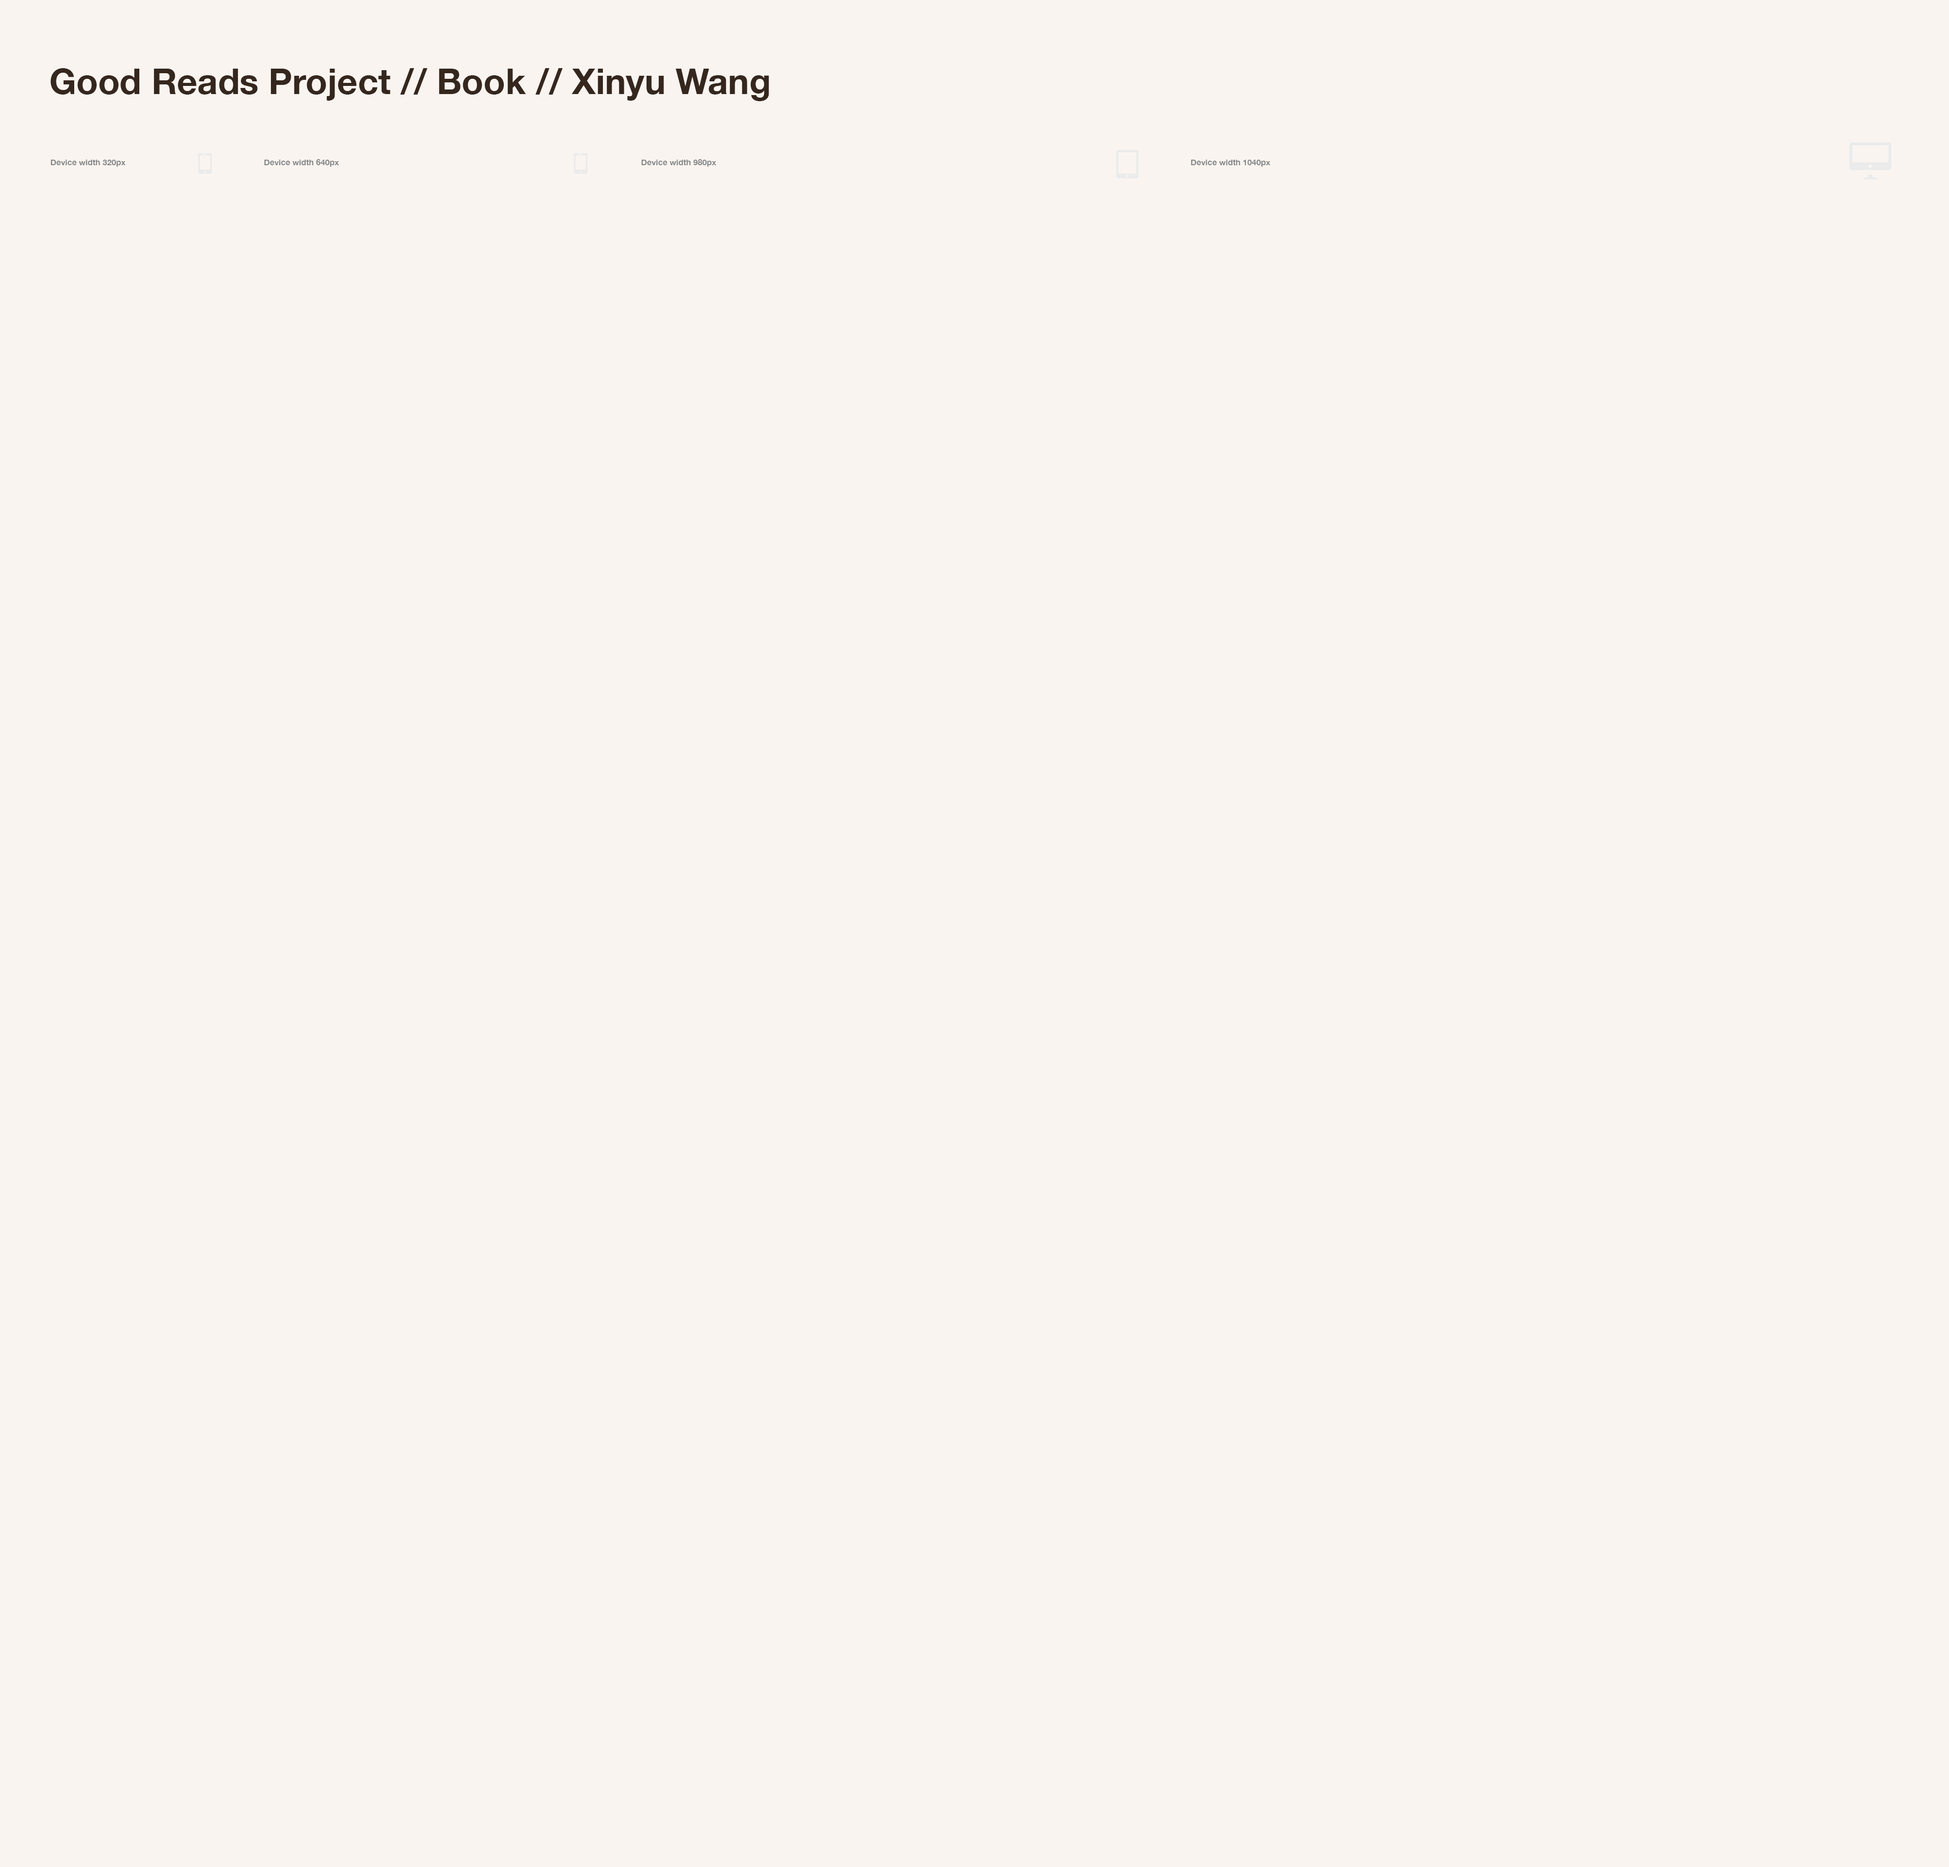
<style>
.page{position:relative;width:1949px;height:1867px;background:#f9f4f0}
.page>*{position:absolute;margin:0}
.t1{font:35.6px "HelveticaNeue-Bold";color:#35271e}
.t2{font:8.1px "HelveticaNeue-Bold";color:#878787}
</style>
<div class="page">
<p class="t1" style="left:50px;top:68px;width:719px;height:33px">Good Reads Project // Book // Xinyu Wang</p>
<p class="t2" style="left:51px;top:160px;width:75px;height:7px">Device width 320px</p>
<p class="t2" style="left:264px;top:159px;width:75px;height:8px">Device width 640px</p>
<p class="t2" style="left:642px;top:159px;width:74px;height:8px">Device width 980px</p>
<p class="t2" style="left:1191px;top:160px;width:79px;height:7px">Device width 1040px</p>
</div>
